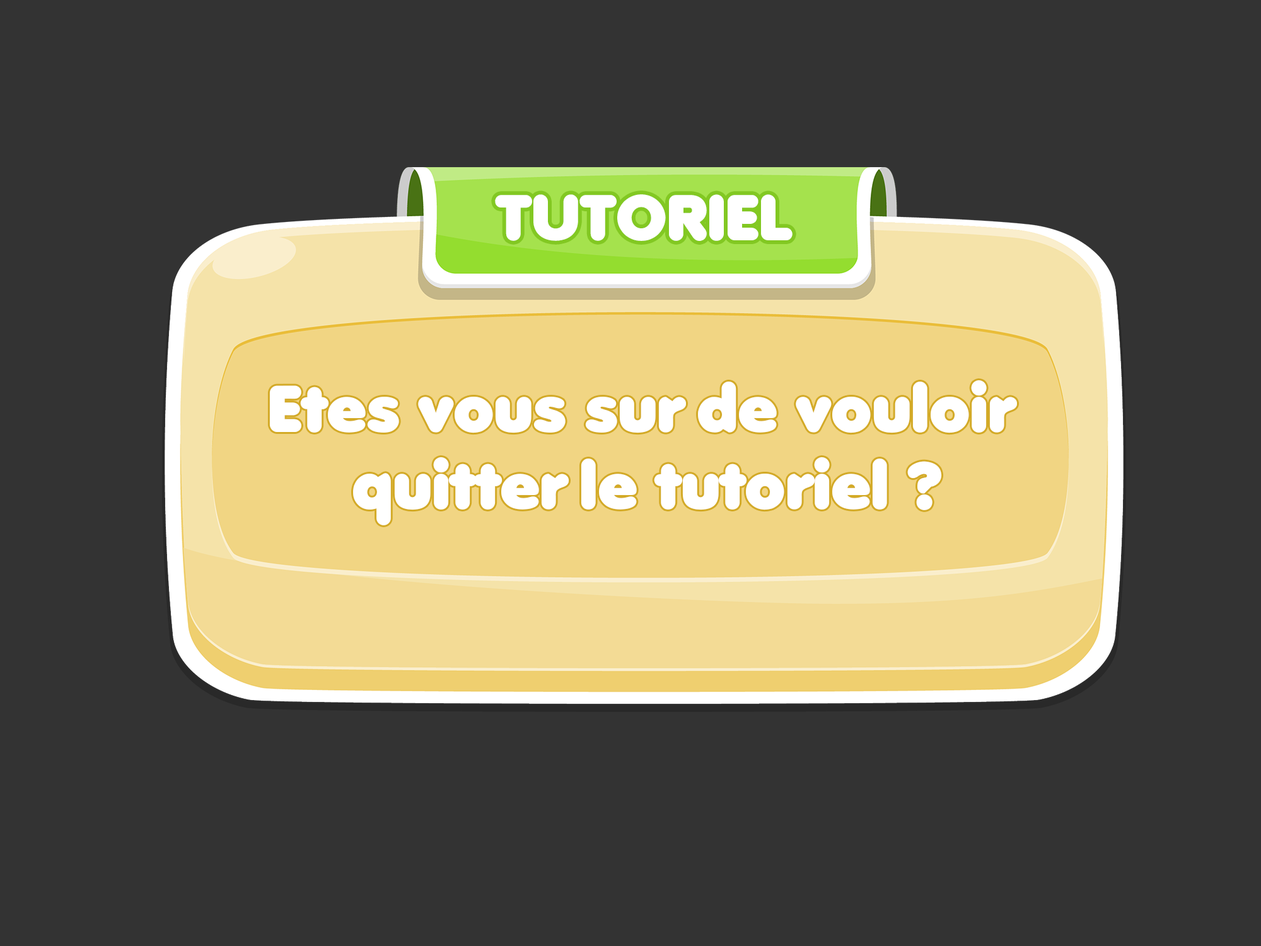
<style>
.page{position:relative;width:1261px;height:946px;background:#333333}
.page>*{position:absolute;margin:0}
.t1{font:62.9px "Debussy";color:#ffffff}
.t2{font:64.3px "Debussy";color:#ffffff}
</style>
<div class="page">
<p class="t1" style="left:495px;top:194px;width:297px;height:47px">TUTORIEL</p>
<p class="t2" style="left:269px;top:380px;width:748px;height:145px;text-align:center">Etes vous sur de vouloir<br>quitter le tutoriel ?</p>
</div>
